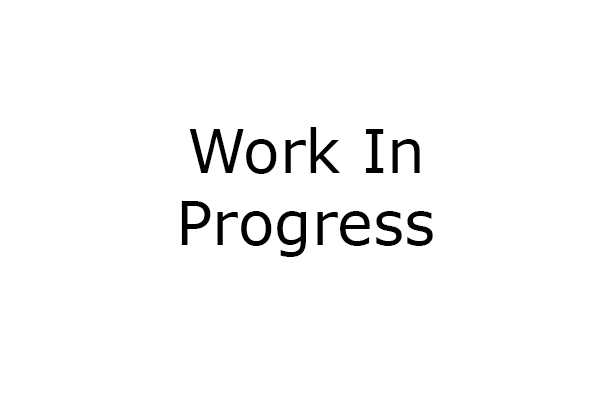
<style>
.page{position:relative;width:600px;height:400px;background:#ffffff}
.page>*{position:absolute;margin:0}
.t1{font:60px "Verdana";color:#000000}
</style>
<div class="page">
<p class="t1" style="left:181px;top:127px;width:252px;height:130px;text-align:center">Work In<br>Progress</p>
</div>
